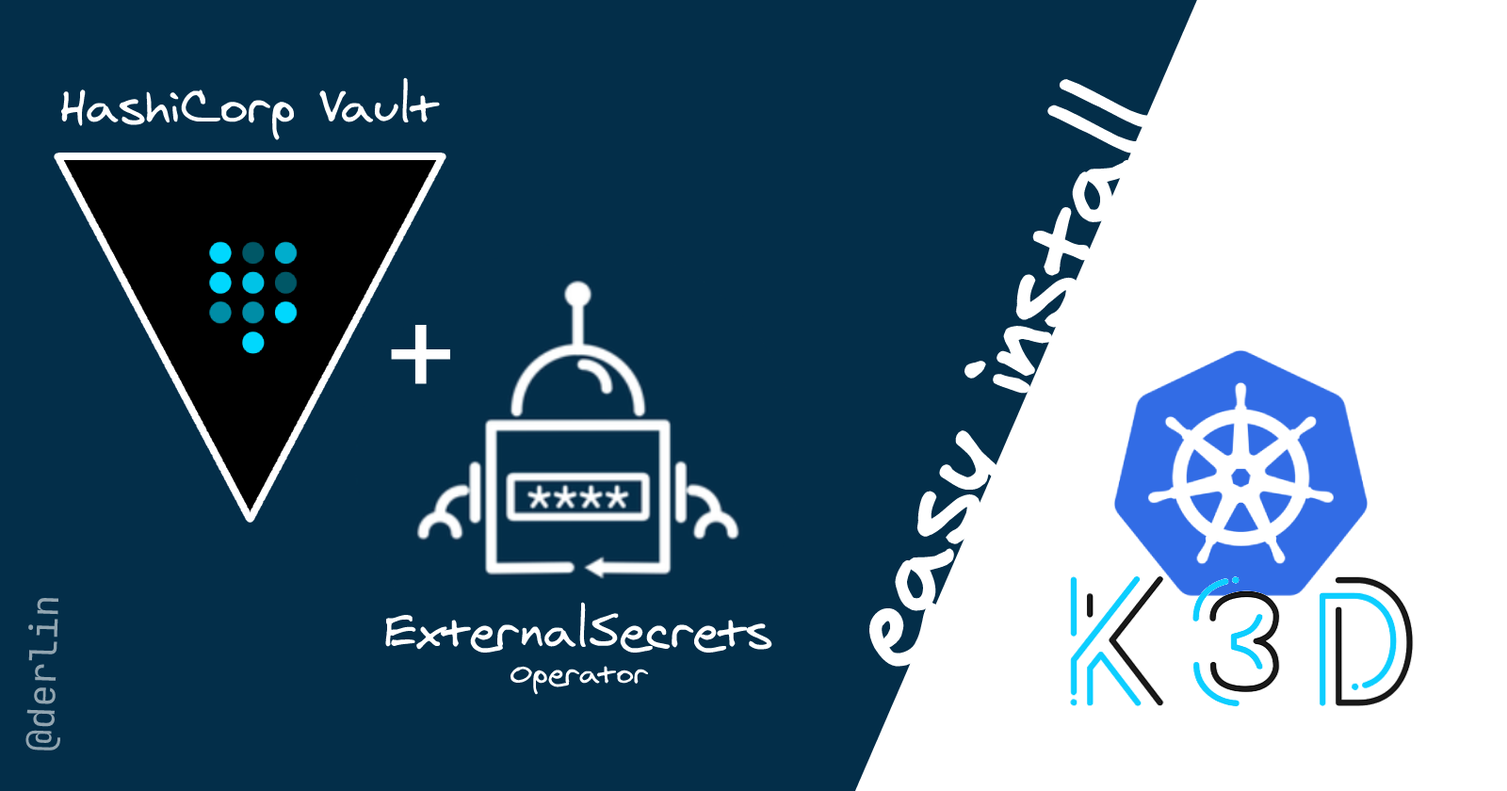
<style>
.page{position:relative;width:1507px;height:791px;background:#032e49}
.page>*{position:absolute;margin:0}
.t1{font:49.2px "Virgil3YOFF";color:#ffffff}
.t2{font:125px "JetBrainsMono-Regular";color:#ffffff}
.t3{font:37.4px "JetBrainsMono-Regular";color:#92a5b0}
.t4{font:31.1px "Virgil3YOFF";color:#ffffff}
</style>
<div class="page">
<p class="t1" style="left:60px;top:77px;width:380px;height:63px">HashiCorp Vault</p>
<p class="t2" style="left:391px;top:325px;width:59px;height:59px">+</p>
<p class="t3" style="left:25px;top:597px;width:36px;height:154px;rotate:-88deg">@derlin</p>
<p class="t1" style="left:385px;top:602px;width:387px;height:93px;text-align:center">ExternalSecrets<br><span class="t4">Operator</span></p>
</div>
